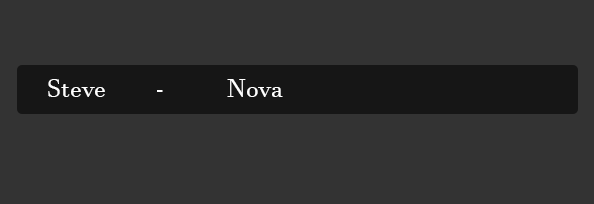
<style>
.page{position:relative;width:594px;height:204px;background:#333333}
.page>*{position:absolute;margin:0}
.t1{font:25px "JavaneseText";color:#ffffff}
</style>
<div class="page">
<p class="t1" style="left:48px;top:79px;width:235px;height:18px">Steve  -  Nova</p>
</div>
